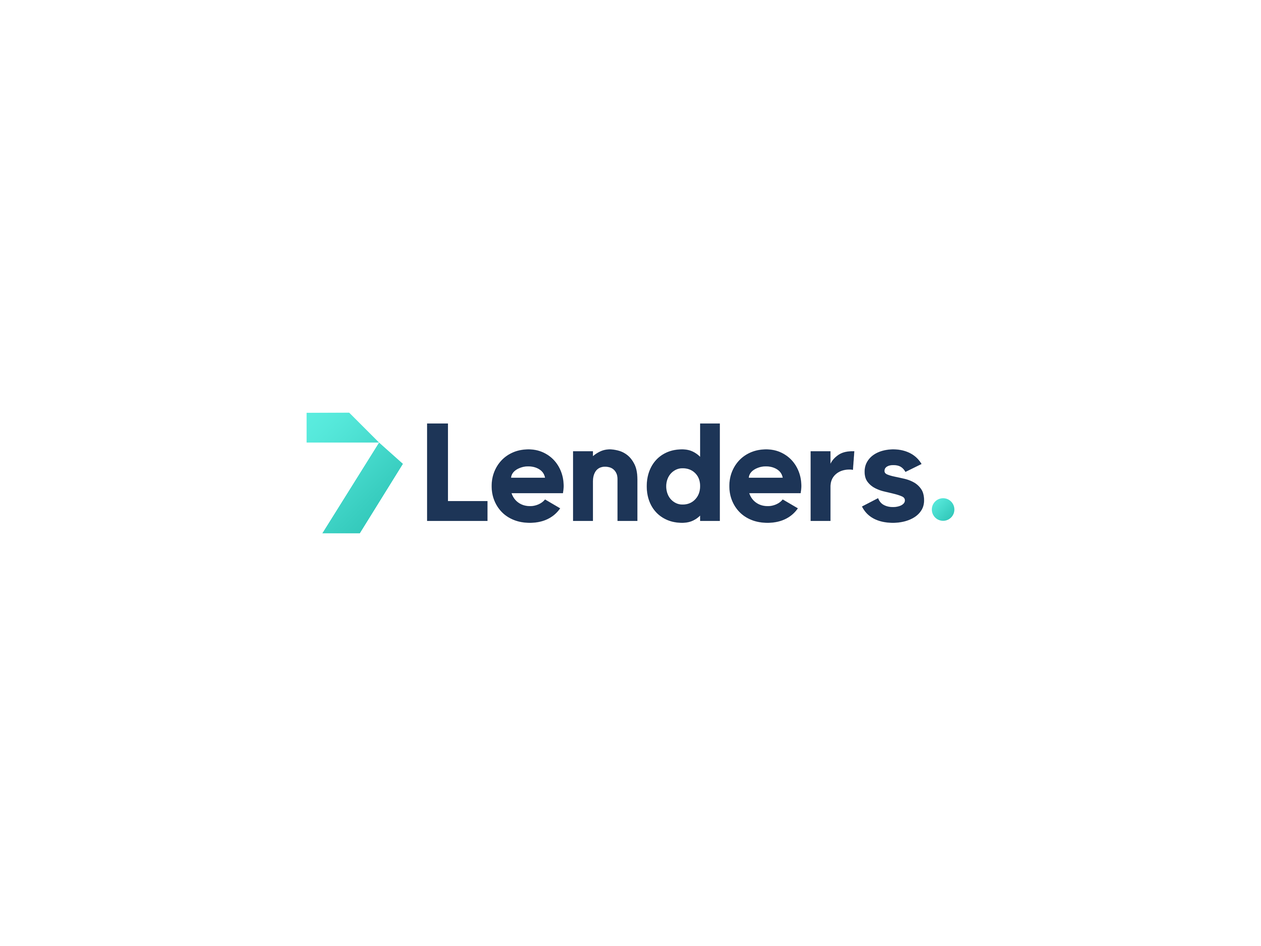
<style>
.page{position:relative;width:1261px;height:946px;background:#ffffff}
.page>*{position:absolute;margin:0}
.t1{font:139.2px "THICCCBOI-ExtraBold";color:#1d3557}
</style>
<div class="page">
<p class="t1" style="left:427px;top:423px;width:497px;height:100px">Lenders</p>
</div>
